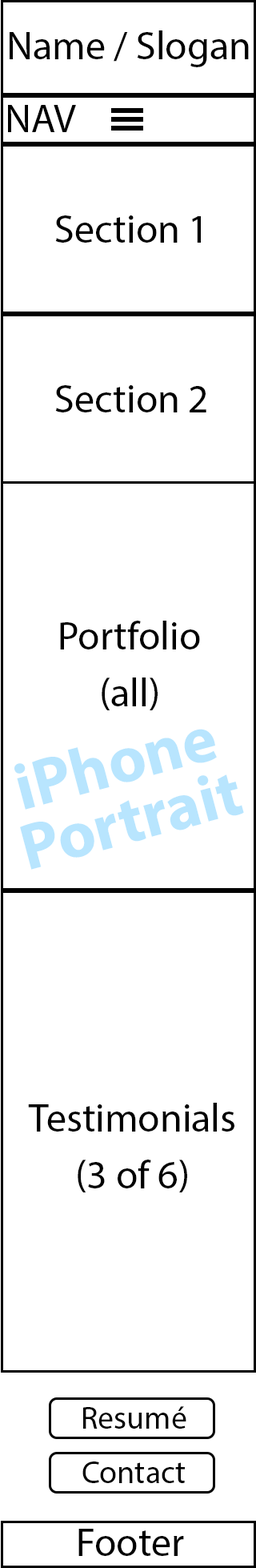
<style>
.page{position:relative;width:256px;height:1568px;background:#ffffff}
.page>*{position:absolute;margin:0}
.t1{font:40px "MyriadPro-Regular";color:#000000}
.t2{font:65.7px/50.5px "MyriadPro-Bold";color:#b8e5fe}
.t3{font:32px "MyriadPro-Regular";color:#000000}
</style>
<div class="page">
<p class="t1" style="left:10px;top:30px;width:239px;height:37px">Name / Slogan</p>
<p class="t1" style="left:8px;top:105px;width:68px;height:27px">NAV</p>
<p class="t1" style="left:55px;top:215px;width:146px;height:28px">Section 1</p>
<p class="t1" style="left:55px;top:385px;width:152px;height:27px">Section 2</p>
<p class="t1" style="left:60px;top:621px;width:140px;height:89px;text-align:center">Portfolio<br>(all)</p>
<p class="t2" style="left:14px;top:729px;width:230px;height:141px;text-align:center;rotate:-15deg">iPhone<br>Portrait</p>
<p class="t1" style="left:28px;top:1103px;width:207px;height:89px;text-align:center">Testimonials<br>(3 of 6)</p>
<p class="t3" style="left:83px;top:1406px;width:104px;height:23px">Resumé</p>
<p class="t3" style="left:82px;top:1461px;width:103px;height:22px">Contact</p>
<p class="t1" style="left:78px;top:1529px;width:106px;height:27px">Footer</p>
</div>
